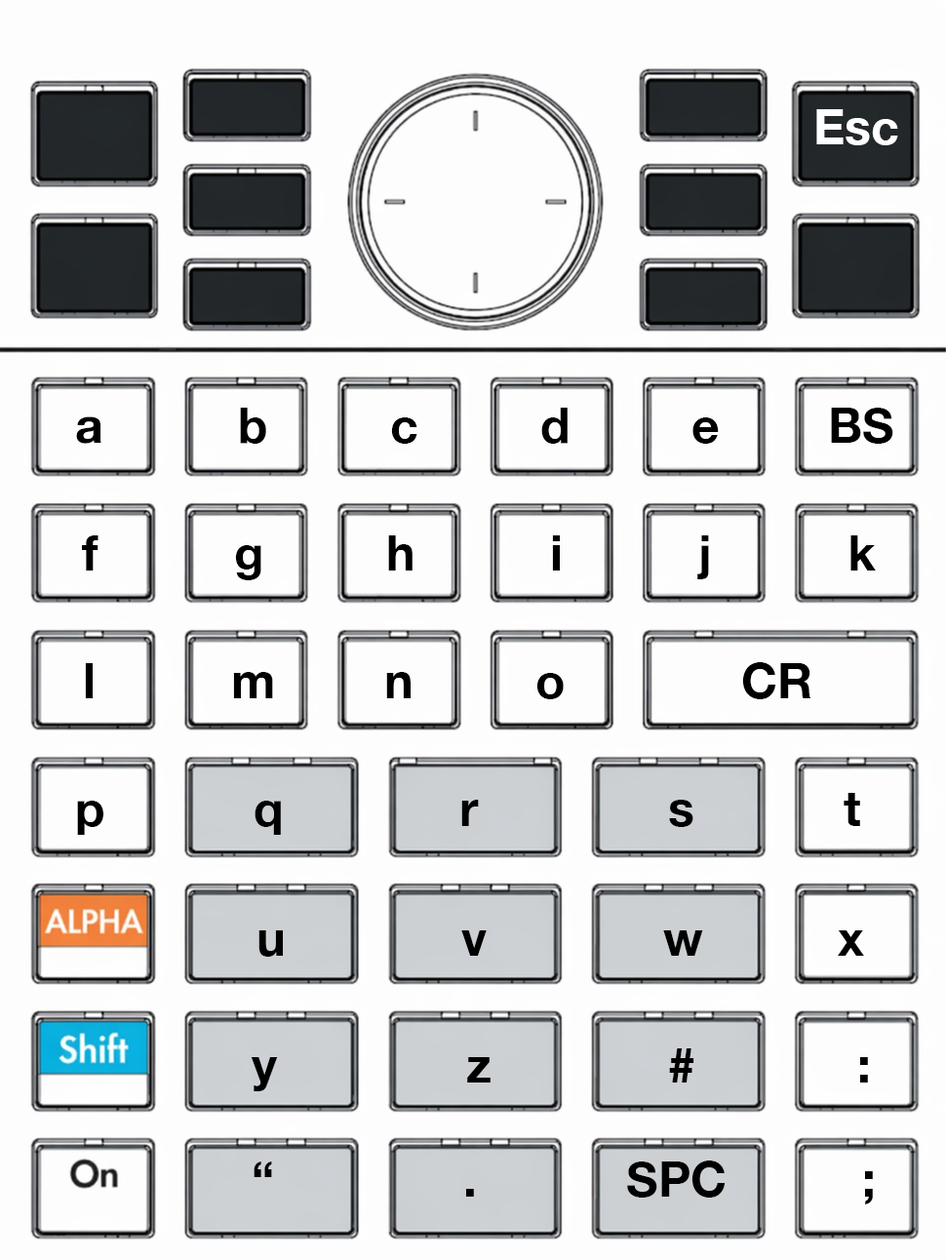
<style>
.page{position:relative;width:946px;height:1260px;background:#fdfdfd}
.page>*{position:absolute;margin:0}
.t1{font:48.8px "HelveticaNeue-Bold";color:#ffffff}
.t2{font:48.8px "HelveticaNeue-Bold";color:#000000}
</style>
<div class="page">
<p class="t1" style="left:816px;top:109px;width:82px;height:36px">Esc</p>
<p class="t2" style="left:76px;top:408px;width:818px;height:36px">a          b         c         d         e        BS</p>
<p class="t2" style="left:82px;top:536px;width:794px;height:44px">f          g         h          i          j          k</p>
<p class="t2" style="left:85px;top:662px;width:727px;height:37px">l          m        n         o             CR</p>
<p class="t2" style="left:77px;top:793px;width:783px;height:42px">p           q             r              s           t</p>
<p class="t2" style="left:258px;top:931px;width:606px;height:26px">u             v             w          x</p>
<p class="t2" style="left:251px;top:1049px;width:617px;height:43px">y              z             #            :</p>
<p class="t2" style="left:254px;top:1161px;width:619px;height:44px">“              .           SPC          ;</p>
</div>
